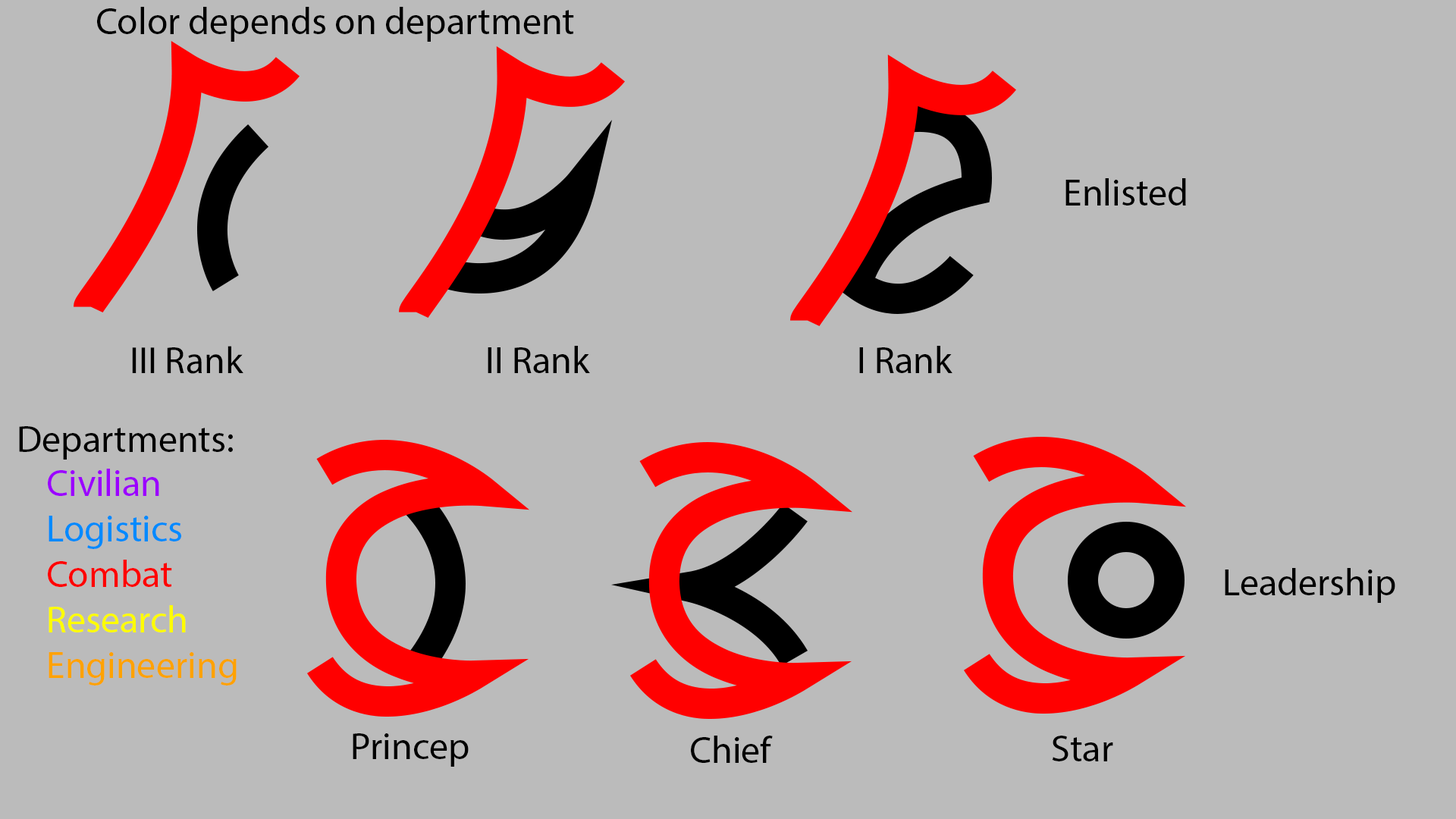
<style>
.page{position:relative;width:1456px;height:819px;background:#bbbbbb}
.page>*{position:absolute;margin:0}
.t1{font:37.9px "MyriadPro-Regular";color:#000000}
.t2{font:37.9px "MyriadPro-Regular";color:#ffa200}
.t3{font:37.9px "MyriadPro-Regular";color:#9c00ff}
.t4{font:37.9px "MyriadPro-Regular";color:#008aff}
.t5{font:37.9px "MyriadPro-Regular";color:#ff0000}
.t6{font:37.9px "MyriadPro-Regular";color:#fffc00}
</style>
<div class="page">
<p class="t1" style="left:97px;top:7px;width:477px;height:35px">Color depends on department</p>
<p class="t1" style="left:1065px;top:178px;width:121px;height:28px">Enlisted</p>
<p class="t1" style="left:132px;top:346px;width:111px;height:28px">III Rank</p>
<p class="t1" style="left:488px;top:346px;width:102px;height:27px">II Rank</p>
<p class="t1" style="left:859px;top:346px;width:93px;height:27px">I Rank</p>
<p class="t1" style="left:19px;top:426px;width:214px;height:34px">Departments:</p>
<p class="t2" style="left:48px;top:469px;width:189px;height:217px"><span class="t3">Civilian<br></span><span class="t4">Logistics<br></span><span class="t5">Combat<br></span><span class="t6">Research<br></span>Engineering</p>
<p class="t1" style="left:1225px;top:568px;width:170px;height:35px">Leadership</p>
<p class="t1" style="left:353px;top:733px;width:116px;height:34px">Princep</p>
<p class="t1" style="left:691px;top:736px;width:82px;height:27px">Chief</p>
<p class="t1" style="left:1052px;top:736px;width:61px;height:25px">Star</p>
</div>
